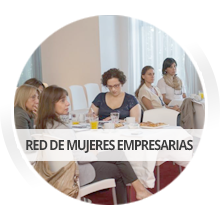
<style>
.page{position:relative;width:220px;height:220px;background:#ffffff}
.page>*{position:absolute;margin:0}
.t1{font:14px "OpenSans-Bold";letter-spacing:-0.075em;color:#3d3d3d;scale:0.9 1}
</style>
<div class="page">
<p class="t1" style="left:26px;top:139px;width:167px;height:14px">RED DE MUJERES EMPRESARIAS</p>
</div>
